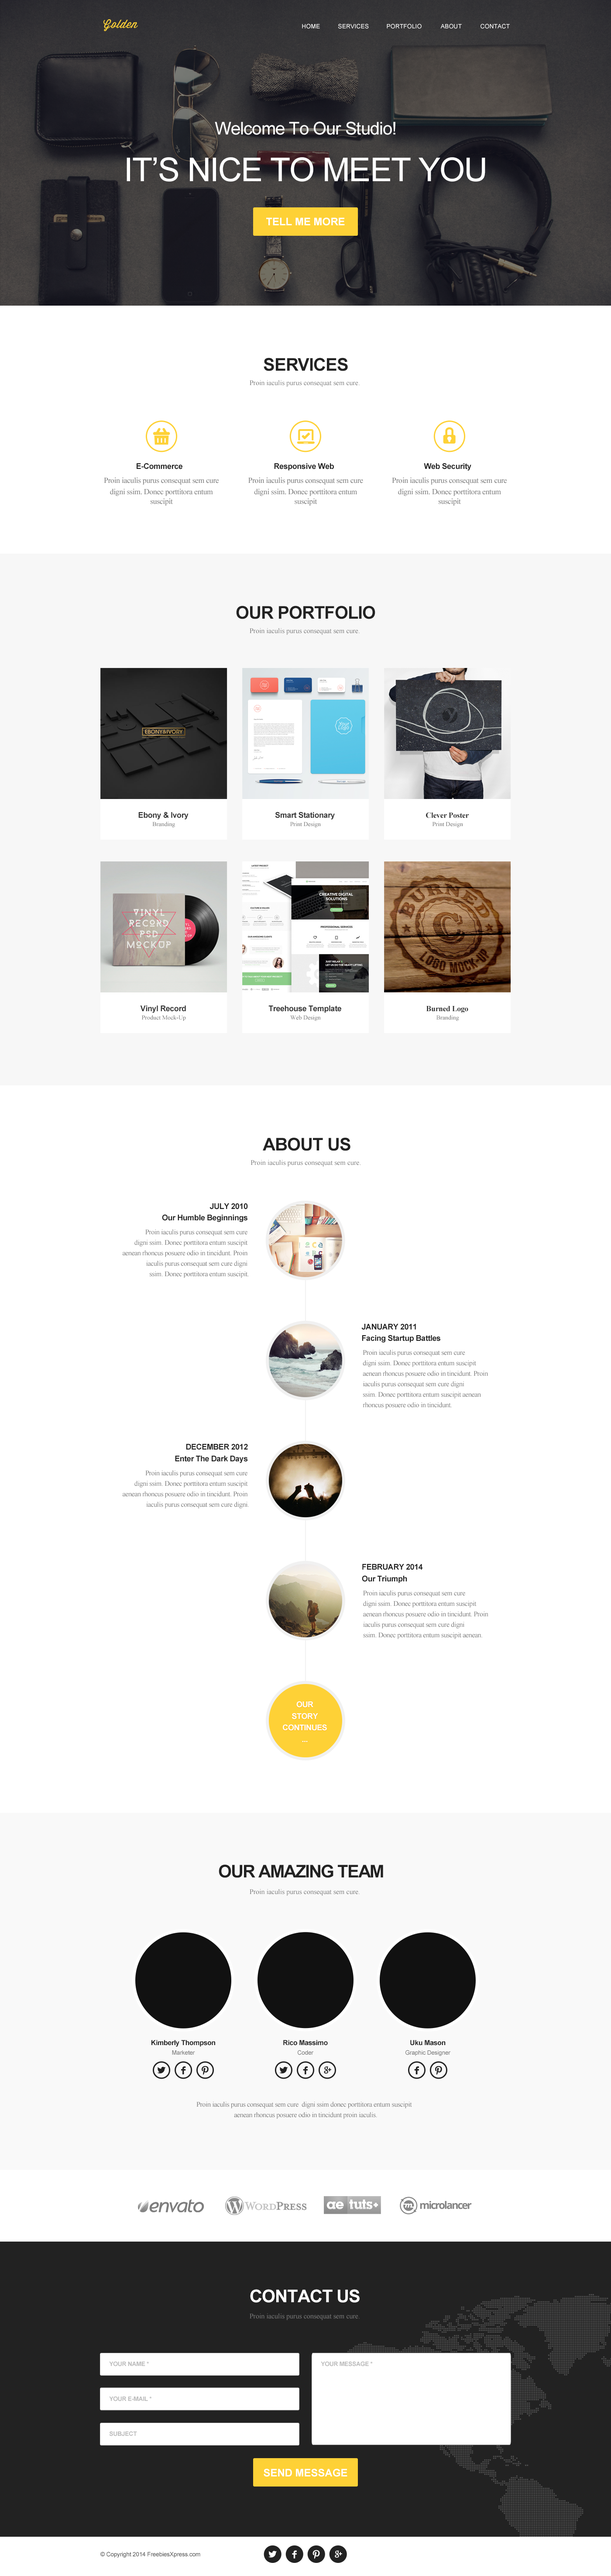
<style>
.page{position:relative;width:611px;height:2576px;background:#ffffff}
.page>*{position:absolute;margin:0}
.t1{font:11.4px "Wisdom-Script";letter-spacing:0.05em;color:#fed136}
.t2{font:6.1px "ArialMT";color:#ffffff;text-transform:uppercase}
.t3{font:17.5px "ArialMT";letter-spacing:-0.025em;color:#ffffff}
.t4{font:32.7px "ArialMT";letter-spacing:-0.025em;color:#ffffff;text-transform:uppercase}
.t5{font:10.5px "Arial-BoldMT";color:#ffffff;text-transform:uppercase}
.t6{font:17.5px "Arial-BoldMT";letter-spacing:-0.025em;color:#222222;text-transform:uppercase}
.t7{font:7px "TimesNewRomanPSMT";color:#777777}
.t8{font:7.9px "Arial-BoldMT";letter-spacing:-0.025em;color:#222222}
.t9{font:7.9px "TimesNewRomanPSMT";letter-spacing:-0.025em;color:#777777}
.t10{font:7.9px "Arial-BoldMT";letter-spacing:-0.025em;color:#333333}
.t11{font:6.1px "TimesNewRomanPSMT";color:#737373}
.t12{font:7.9px "Arial-BoldMT";letter-spacing:-0.025em;color:#222222;text-transform:uppercase}
.t13{font:7px "TimesNewRomanPSMT";letter-spacing:-0.025em;color:#777777}
.t14{font:7.9px "Arial-BoldMT";letter-spacing:-0.025em;color:#ffffff;text-transform:uppercase}
.t15{font:17.5px "Arial-BoldMT";letter-spacing:-0.05em;color:#222222;text-transform:uppercase}
.t16{font:7px/21.8px "Arial-BoldMT";letter-spacing:-0.025em;color:#222222}
.t17{font:6.1px "ArialMT";letter-spacing:-0.025em;color:#777777}
.t18{font:17.5px "Arial-BoldMT";letter-spacing:-0.025em;color:#ffffff;text-transform:uppercase}
.t19{font:6.1px "Arial-BoldMT";letter-spacing:-0.025em;color:#bbbbbb;text-transform:uppercase}
.t20{font:6.1px "ArialMT";letter-spacing:-0.025em;color:#555555}
</style>
<div class="page">
<p class="t1" style="left:103px;top:19px;width:35px;height:12px">Golden</p>
<p class="t2" style="left:302px;top:24px;width:18px;height:5px">Home</p>
<p class="t2" style="left:338px;top:24px;width:31px;height:5px">Services</p>
<p class="t2" style="left:387px;top:24px;width:35px;height:5px">Portfolio</p>
<p class="t2" style="left:441px;top:24px;width:21px;height:5px">About</p>
<p class="t2" style="left:481px;top:24px;width:29px;height:5px">Contact</p>
<p class="t3" style="left:215px;top:121px;width:181px;height:14px">Welcome To Our Studio!</p>
<p class="t4" style="left:127px;top:157px;width:359px;height:25px">It’s nice to Meet you</p>
<p class="t5" style="left:266px;top:217px;width:79px;height:9px">Tell Me More</p>
<p class="t6" style="left:264px;top:358px;width:84px;height:13px">Services</p>
<p class="t7" style="left:250px;top:380px;width:110px;height:7px">Proin iaculis purus consequat sem cure.</p>
<p class="t8" style="left:137px;top:463px;width:46px;height:6px">E-Commerce</p>
<p class="t8" style="left:274px;top:463px;width:60px;height:8px">Responsive Web</p>
<p class="t8" style="left:424px;top:463px;width:48px;height:8px">Web Security</p>
<p class="t9" style="left:104px;top:477px;width:115px;height:29px;text-align:center">Proin iaculis purus consequat sem cure <br>digni ssim. Donec porttitora entum suscipit <br>aenean rhoncus posuere odio in tincidunt.</p>
<p class="t9" style="left:248px;top:477px;width:115px;height:29px;text-align:center">Proin iaculis purus consequat sem cure <br>digni ssim. Donec porttitora entum suscipit <br>aenean rhoncus posuere odio in tincidunt.</p>
<p class="t9" style="left:392px;top:477px;width:115px;height:29px;text-align:center">Proin iaculis purus consequat sem cure <br>digni ssim. Donec porttitora entum suscipit <br>aenean rhoncus posuere odio in tincidunt.</p>
<p class="t6" style="left:236px;top:606px;width:139px;height:13px">Our portfolio</p>
<p class="t7" style="left:250px;top:628px;width:110px;height:7px">Proin iaculis purus consequat sem cure.</p>
<p class="t10" style="left:138px;top:812px;width:51px;height:8px">Ebony &amp; Ivory</p>
<p class="t11" style="left:152px;top:822px;width:23px;height:5px">Branding</p>
<p class="t10" style="left:275px;top:812px;width:60px;height:8px">Smart Stationary</p>
<p class="t11" style="left:290px;top:822px;width:31px;height:5px">Print Design</p>
<p class="t10" style="left:426px;top:812px;width:43px;height:6px">Clever Poster</p>
<p class="t11" style="left:432px;top:822px;width:31px;height:5px">Print Design</p>
<p class="t10" style="left:140px;top:1006px;width:46px;height:7px">Vinyl Record</p>
<p class="t10" style="left:269px;top:1006px;width:72px;height:7px">Treehouse Template</p>
<p class="t10" style="left:426px;top:1006px;width:42px;height:7px">Burned Logo</p>
<p class="t11" style="left:141px;top:1015px;width:45px;height:6px">Product Mock-Up</p>
<p class="t11" style="left:290px;top:1015px;width:31px;height:6px">Web Design</p>
<p class="t11" style="left:437px;top:1015px;width:22px;height:6px">Branding</p>
<p class="t6" style="left:263px;top:1137px;width:88px;height:14px">About Us</p>
<p class="t7" style="left:251px;top:1160px;width:110px;height:7px">Proin iaculis purus consequat sem cure.</p>
<p class="t8" style="left:162px;top:1203px;width:86px;height:19px;text-align:right"><span class="t12">July 2010<br></span>Our Humble Beginnings</p>
<p class="t13" style="left:123px;top:1229px;width:126px;height:49px;text-align:right">Proin iaculis purus consequat sem cure <br>digni ssim. Donec porttitora entum suscipit <br>aenean rhoncus posuere odio in tincidunt. Proin <br>iaculis purus consequat sem cure digni <br>ssim. Donec porttitora entum suscipit.</p>
<p class="t8" style="left:362px;top:1324px;width:79px;height:19px"><span class="t12">January 2011<br></span>Facing Startup Battles</p>
<p class="t13" style="left:363px;top:1350px;width:126px;height:59px">Proin iaculis purus consequat sem cure <br>digni ssim. Donec porttitora entum suscipit <br>aenean rhoncus posuere odio in tincidunt. Proin <br>iaculis purus consequat sem cure digni <br>ssim. Donec porttitora entum suscipit aenean <br>rhoncus posuere odio in tincidunt.</p>
<p class="t8" style="left:175px;top:1443px;width:73px;height:20px;text-align:right"><span class="t12">December 2012<br></span>Enter The Dark Days</p>
<p class="t13" style="left:123px;top:1470px;width:126px;height:38px;text-align:right">Proin iaculis purus consequat sem cure <br>digni ssim. Donec porttitora entum suscipit <br>aenean rhoncus posuere odio in tincidunt. Proin <br>iaculis purus consequat sem cure digni.</p>
<p class="t12" style="left:362px;top:1564px;width:61px;height:19px">february 2014<br><span class="t8">Our Triumph</span></p>
<p class="t13" style="left:363px;top:1590px;width:126px;height:49px">Proin iaculis purus consequat sem cure <br>digni ssim. Donec porttitora entum suscipit <br>aenean rhoncus posuere odio in tincidunt. Proin <br>iaculis purus consequat sem cure digni <br>ssim. Donec porttitora entum suscipit aenean.</p>
<p class="t14" style="left:283px;top:1701px;width:44px;height:41px;text-align:center">Our<br>Story<br>Continues<br>...</p>
<p class="t15" style="left:219px;top:1864px;width:164px;height:14px">our amazing team</p>
<p class="t7" style="left:250px;top:1889px;width:110px;height:7px">Proin iaculis purus consequat sem cure.</p>
<p class="t16" style="left:152px;top:2040px;width:63px;height:15px;text-align:center">Kimberly Thompson<br><span class="t17">Marketer</span></p>
<p class="t16" style="left:283px;top:2040px;width:45px;height:15px;text-align:center">Rico Massimo<br><span class="t17">Coder</span></p>
<p class="t17" style="left:406px;top:2040px;width:45px;height:16px;text-align:center"><span class="t16">Uku Mason<br></span>Graphic Designer</p>
<p class="t13" style="left:196px;top:2101px;width:216px;height:18px;text-align:center">Proin iaculis purus consequat sem cure  digni ssim donec porttitora entum suscipit  <br>aenean rhoncus posuere odio in tincidunt proin iaculis.</p>
<p class="t18" style="left:250px;top:2289px;width:110px;height:14px">Contact us</p>
<p class="t7" style="left:250px;top:2313px;width:110px;height:7px">Proin iaculis purus consequat sem cure.</p>
<p class="t19" style="left:109px;top:2361px;width:40px;height:5px">your Name *</p>
<p class="t19" style="left:321px;top:2361px;width:52px;height:5px">Your message *</p>
<p class="t19" style="left:109px;top:2396px;width:43px;height:5px">your e-mail *</p>
<p class="t19" style="left:109px;top:2431px;width:28px;height:5px">subject</p>
<p class="t5" style="left:264px;top:2469px;width:84px;height:8px">Send Message</p>
<p class="t20" style="left:100px;top:2552px;width:100px;height:6px">© Copyright 2014 FreebiesXpress.com</p>
</div>
